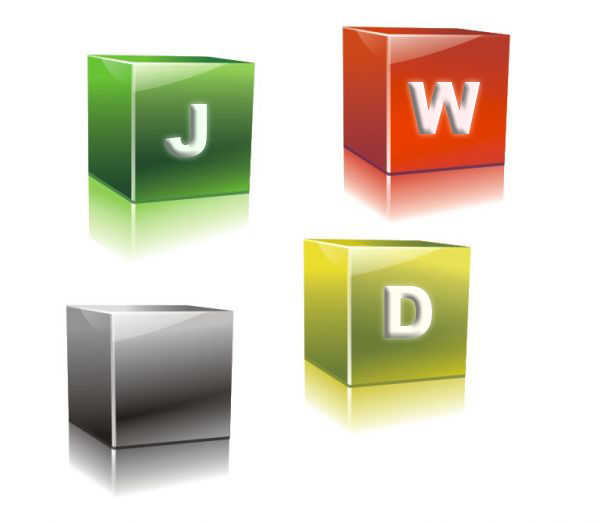
<style>
.page{position:relative;width:600px;height:523px;background:#ffffff}
.page>*{position:absolute;margin:0}
.t1{font:72px "Arial-Black";color:#ffeded}
.t2{font:72px "Arial-Black";color:#edffed}
.t3{font:72px "Arial-Black";color:#fffeee}
</style>
<div class="page">
<p class="t1" style="left:408px;top:82px;width:72px;height:52px">W</p>
<p class="t2" style="left:165px;top:104px;width:42px;height:53px">J</p>
<p class="t3" style="left:384px;top:286px;width:48px;height:52px">D</p>
</div>
